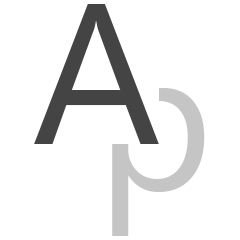
<style>
.page{position:relative;width:240px;height:240px;background:#ffffff}
.page>*{position:absolute;margin:0}
.t1{font:200px "SegoeUISymbol";color:#444444}
.t2{font:200px "SegoeUISymbol";color:#c5c5c5}
</style>
<div class="page">
<p class="t1" style="left:34px;top:4px;width:125px;height:140px">A</p>
<p class="t2" style="left:112px;top:88px;width:93px;height:148px">p</p>
</div>
